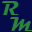
<style>
.page{position:relative;width:32px;height:32px;background:#060b4b}
.page>*{position:absolute;margin:0}
.t1{font:20px "Magneto-Bold";color:#29843c}
</style>
<div class="page">
<p class="t1" style="left:1px;top:1px;width:18px;height:14px">R</p>
<p class="t1" style="left:10px;top:17px;width:23px;height:14px">M</p>
</div>
